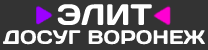
<style>
.page{position:relative;width:208px;height:50px;background:#333333}
.page>*{position:absolute;margin:0}
.t1{font:19.6px "DaysOne-Regular";color:#ffffff}
</style>
<div class="page">
<p class="t1" style="left:3px;top:30px;width:202px;height:15px">ДОСУГ ВОРОНЕЖ</p>
</div>
